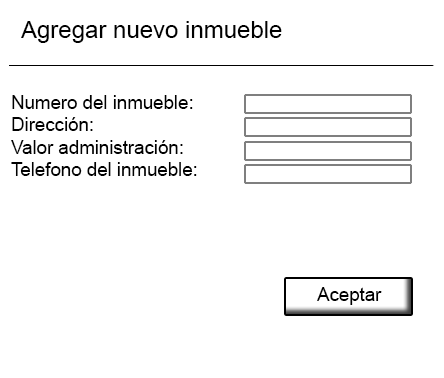
<style>
.page{position:relative;width:444px;height:378px;background:#ffffff}
.page>*{position:absolute;margin:0}
.t1{font:24px "ArialMT";color:#000000}
.t2{font:18.7px "ArialMT";color:#000000}
</style>
<div class="page">
<p class="t1" style="left:21px;top:21px;width:261px;height:22px">Agregar nuevo inmueble</p>
<p class="t2" style="left:11px;top:95px;width:186px;height:81px">Numero del inmueble:<br>Dirección:<br>Valor administración:<br>Telefono del inmueble:</p>
<p class="t2" style="left:317px;top:287px;width:65px;height:18px">Aceptar</p>
</div>
